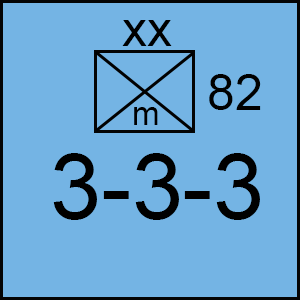
<style>
.page{position:relative;width:300px;height:300px;background:#74b4e4}
.page>*{position:absolute;margin:0}
.t1{font:50px "ArialMT";color:#000000}
.t2{font:33.3px "ArialMT";color:#000000}
.t3{font:91.7px "ArialMT";color:#000000}
</style>
<div class="page">
<p class="t1" style="left:122px;top:20px;width:50px;height:26px">xx</p>
<p class="t1" style="left:209px;top:74px;width:52px;height:36px">82</p>
<p class="t2" style="left:134px;top:107px;width:24px;height:18px">m</p>
<p class="t3" style="left:53px;top:153px;width:207px;height:67px">3-3-3</p>
</div>
